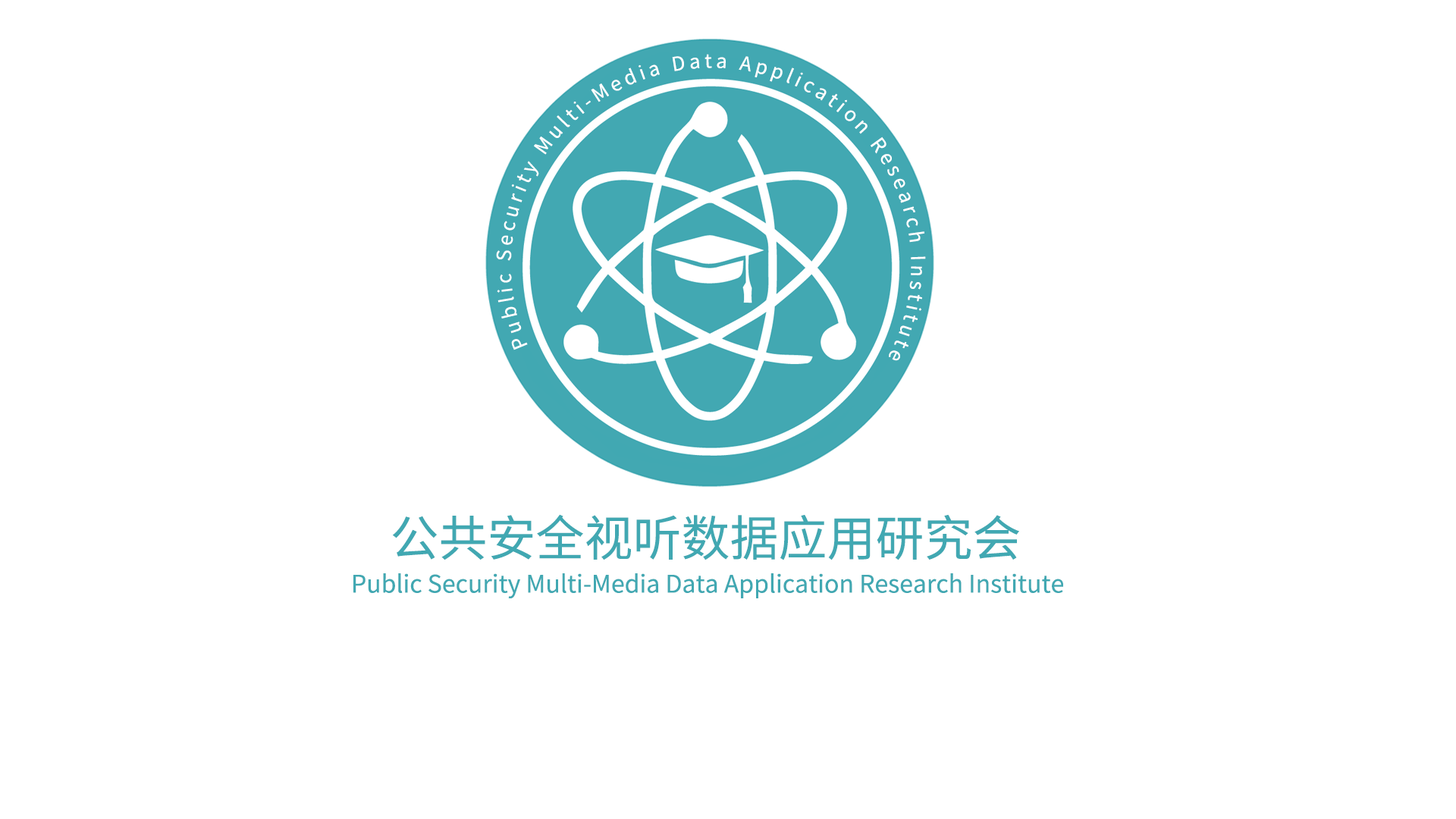
<style>
.page{position:relative;width:1456px;height:819px;background:#ffffff}
.page>*{position:absolute;margin:0}
.t1{font:48.5px "NotoSansHans-Regular";color:#41a8b2}
.t2{font:24.3px "NotoSansHans-Regular";color:#41a8b2}
</style>
<div class="page">
<p class="t1" style="left:393px;top:514px;width:626px;height:46px">公共安全视听数据应用研究会</p>
<p class="t2" style="left:353px;top:573px;width:710px;height:25px">Public Security Multi-Media Data Application Research Institute</p>
</div>
